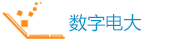
<style>
.page{position:relative;width:170px;height:42px;background:#ffffff}
.page>*{position:absolute;margin:0}
.t1{font:18px "MicrosoftYaHei";letter-spacing:0.01em;color:#0298cd}
</style>
<div class="page">
<p class="t1" style="left:69px;top:14px;width:73px;height:18px">数字电大</p>
</div>
